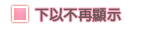
<style>
.page{position:relative;width:160px;height:30px;background:#ffffff}
.page>*{position:absolute;margin:0}
.t1{font:14px "AdobeFanHeitiStd-Bold";color:#7c6a6a;font-weight:bold}
</style>
<div class="page">
<p class="t1" style="left:35px;top:8px;width:86px;height:14px">下以不再顯示</p>
</div>
